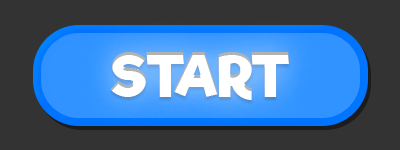
<style>
.page{position:relative;width:400px;height:150px;background:#333333}
.page>*{position:absolute;margin:0}
.t1{font:58.3px "RifficFree-Bold";color:#ffffff}
</style>
<div class="page">
<p class="t1" style="left:110px;top:52px;width:180px;height:48px">START</p>
</div>
